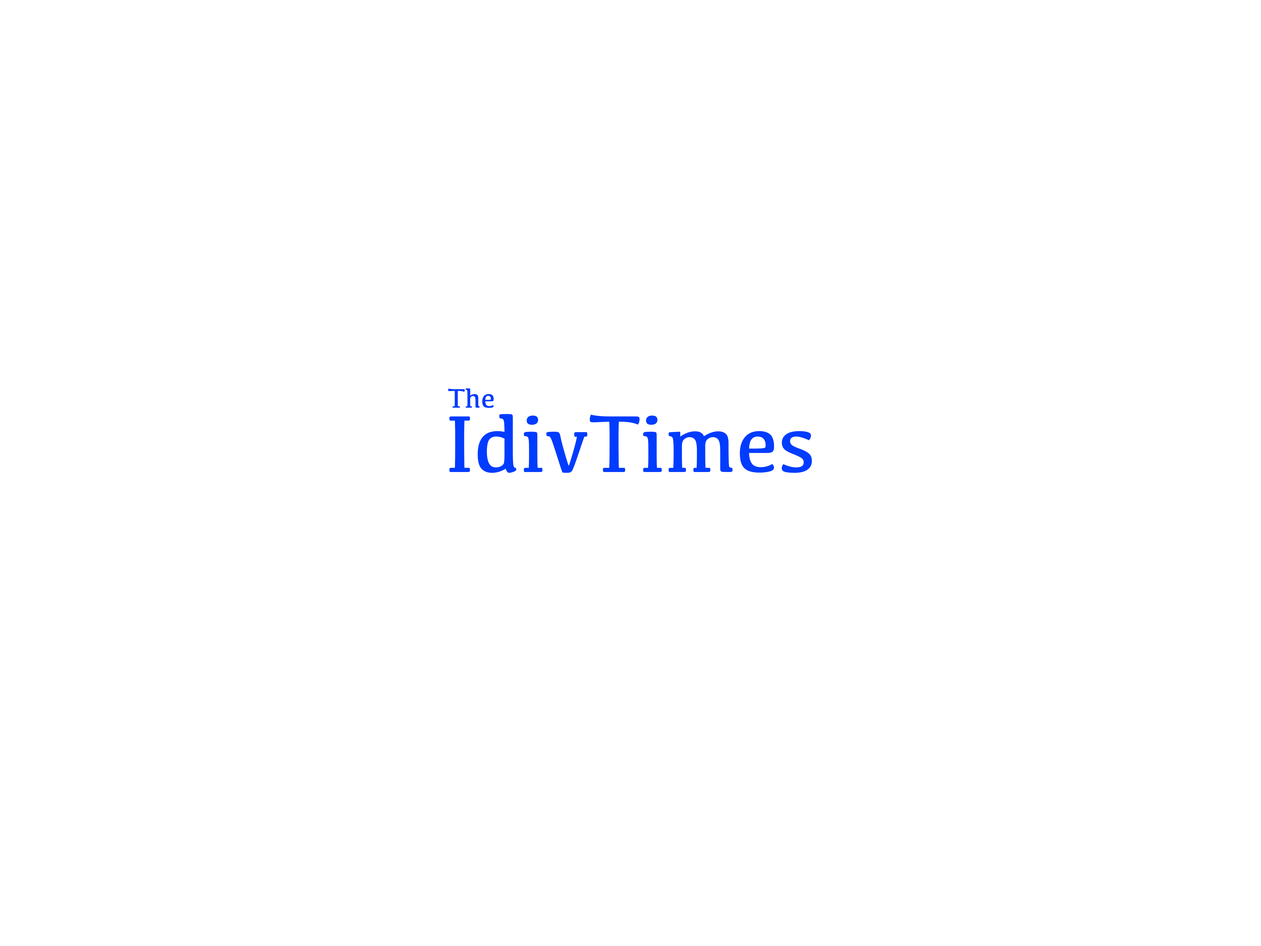
<style>
.page{position:relative;width:1261px;height:946px;background:#ffffff}
.page>*{position:absolute;margin:0}
.t1{font:27.8px "Kefa-Regular";color:#003cff}
.t2{font:83.4px "Kefa-Regular";color:#003cff}
</style>
<div class="page">
<p class="t1" style="left:448px;top:388px;width:46px;height:20px">The</p>
<p class="t2" style="left:449px;top:414px;width:363px;height:59px">IdivTimes</p>
</div>
